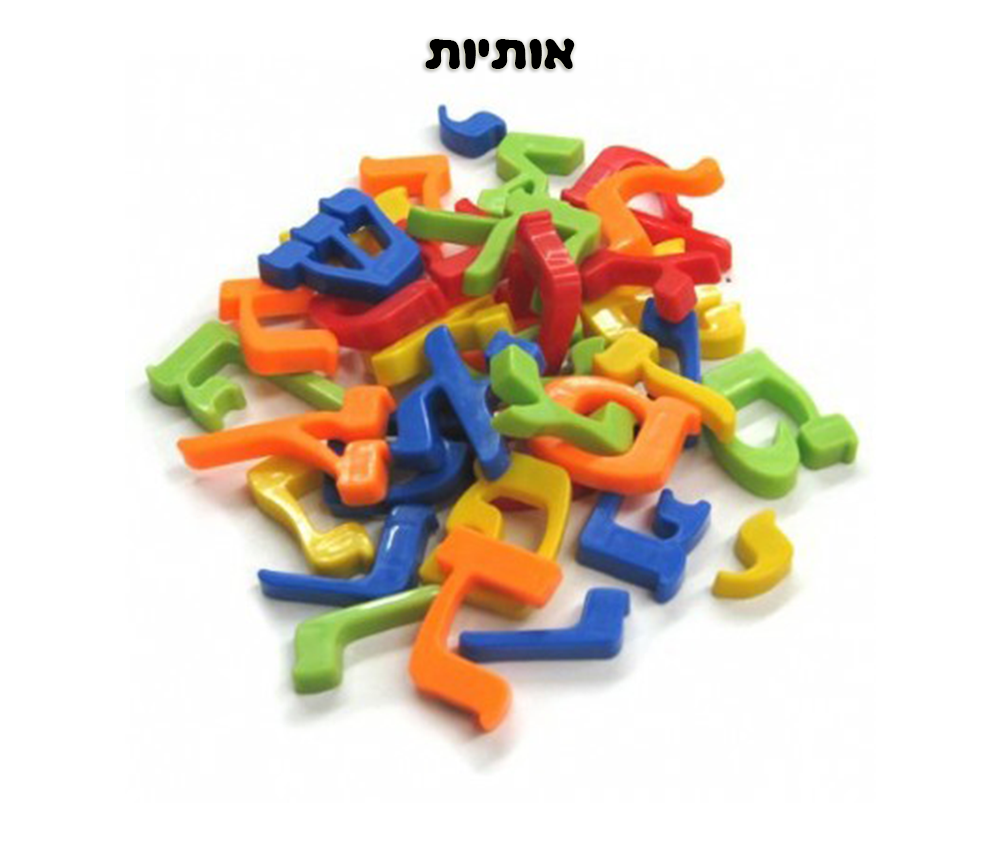
<style>
.page{position:relative;width:1000px;height:841px;background:#ffffff}
.page>*{position:absolute;margin:0}
.t1{font:48px "GanCLM-Bold";color:#000000}
</style>
<div class="page">
<p class="t1" style="left:425px;top:38px;width:150px;height:31px">תויתוא</p>
</div>
